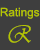
<style>
.page{position:relative;width:40px;height:50px;background:#3e3e3e}
.page>*{position:absolute;margin:0}
.t1{font:11.7px "ArialMT";color:#b5c501}
.t2{font:25px "Vivaldii";color:#b5c501;scale:0.86 1}
</style>
<div class="page">
<p class="t1" style="left:0px;top:7px;width:40px;height:12px">Ratings</p>
<p class="t2" style="left:8px;top:25px;width:23px;height:18px">R</p>
</div>
